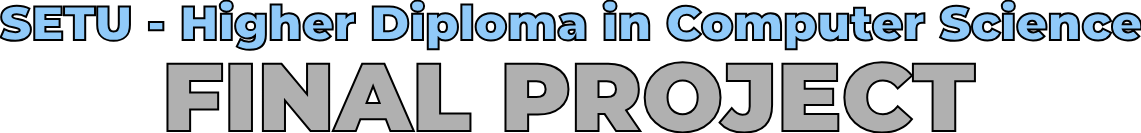
<style>
.page{position:relative;width:1141px;height:133px;background:#ffffff}
.page>*{position:absolute;margin:0}
.t1{font:48px "Montserrat-Black"}
.t2{font:96px "Montserrat-Black";color:#b0b0b0}
</style>
<div class="page">
<p class="t1" style="left:0px;top:0px;width:1143px;height:51px">SETU - Higher Diploma in Computer Science</p>
<p class="t2" style="left:166px;top:61px;width:810px;height:73px">FINAL PROJECT</p>
</div>
